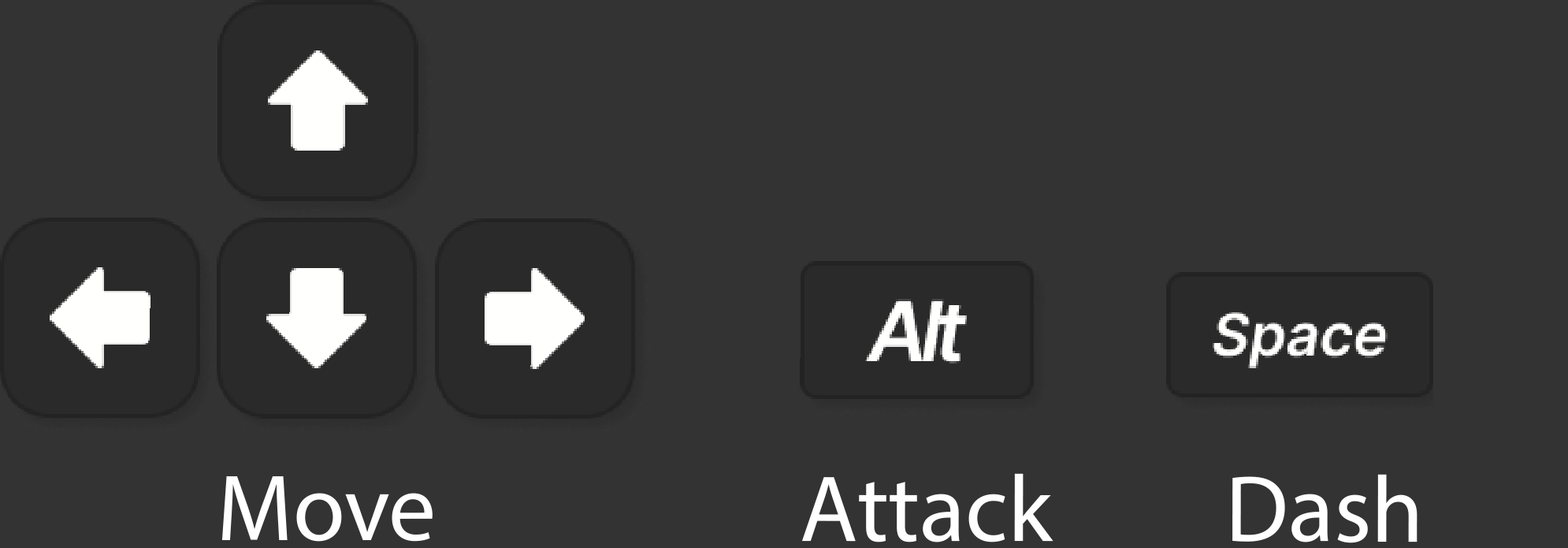
<style>
.page{position:relative;width:1568px;height:548px;background:#333333}
.page>*{position:absolute;margin:0}
.t1{font:94.6px "MyriadPro-Regular";color:#ffffff}
</style>
<div class="page">
<p class="t1" style="left:801px;top:473px;width:252px;height:69px">Attack</p>
<p class="t1" style="left:1232px;top:474px;width:186px;height:69px">Dash</p>
<p class="t1" style="left:221px;top:476px;width:212px;height:65px">Move</p>
</div>
